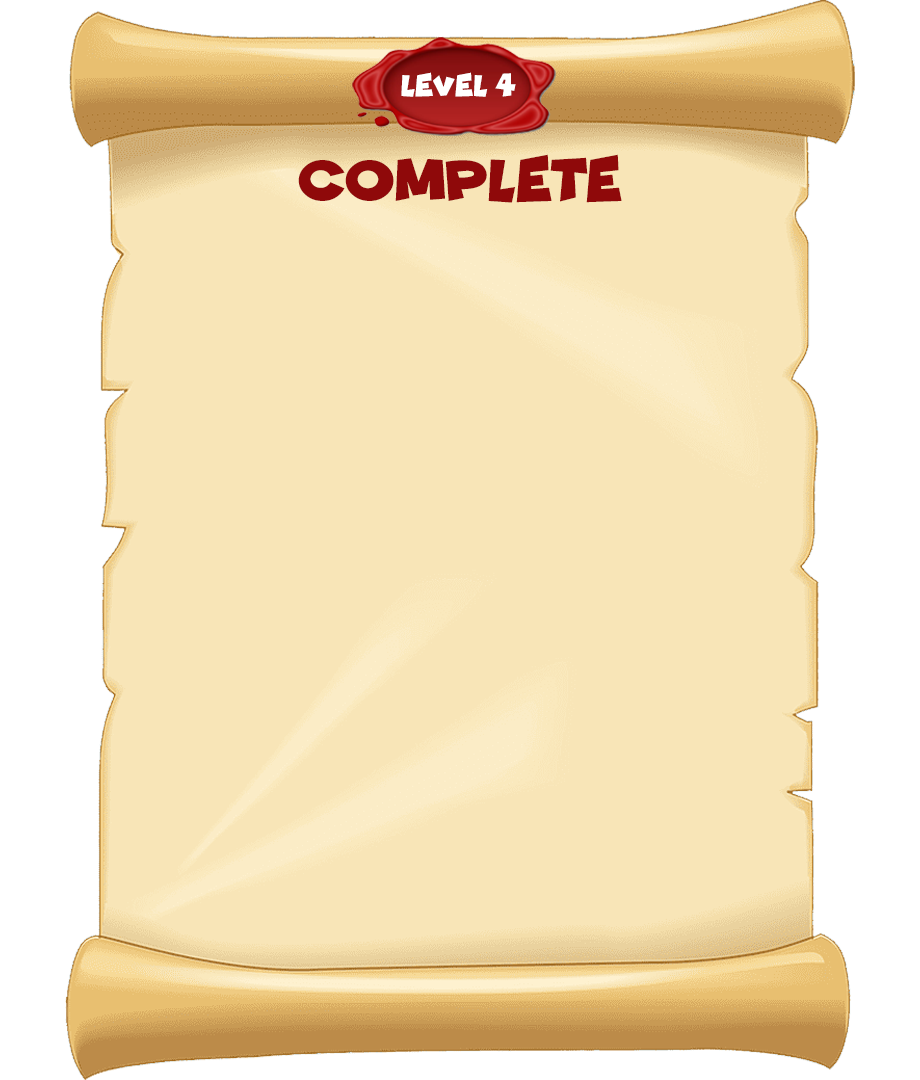
<style>
.page{position:relative;width:920px;height:1080px;background:#f8e5b7}
.page>*{position:absolute;margin:0}
.t1{font:30.2px "Funhouse";color:#ffffff}
.t2{font:60px "Funhouse";color:#8f090a}
</style>
<div class="page">
<p class="t1" style="left:401px;top:72px;width:115px;height:25px">level 4</p>
<p class="t2" style="left:298px;top:154px;width:324px;height:49px">Complete</p>
</div>
